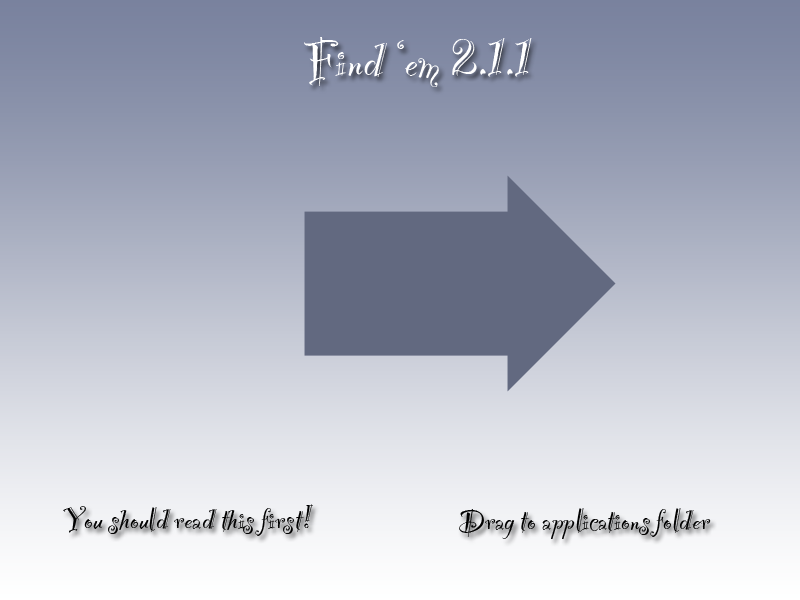
<style>
.page{position:relative;width:800px;height:600px}
.page>*{position:absolute;margin:0}
.t1{font:60px "PartyLetPlain";color:#ffffff}
.t2{font:36px "PartyLetPlain";color:#000000}
</style>
<div class="page">
<p class="t1" style="left:304px;top:37px;width:228px;height:50px">Find ‘em 2.1.1</p>
<p class="t2" style="left:63px;top:504px;width:250px;height:32px">You should read this first!</p>
<p class="t2" style="left:459px;top:508px;width:252px;height:31px">Drag to applications folder</p>
</div>
